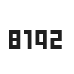
<style>
.page{position:relative;width:74px;height:74px;background:#ffffff}
.page>*{position:absolute;margin:0}
.t1{font:30px "04b24";color:#1f1f1f}
</style>
<div class="page">
<p class="t1" style="left:9px;top:30px;width:53px;height:19px">8192</p>
</div>
